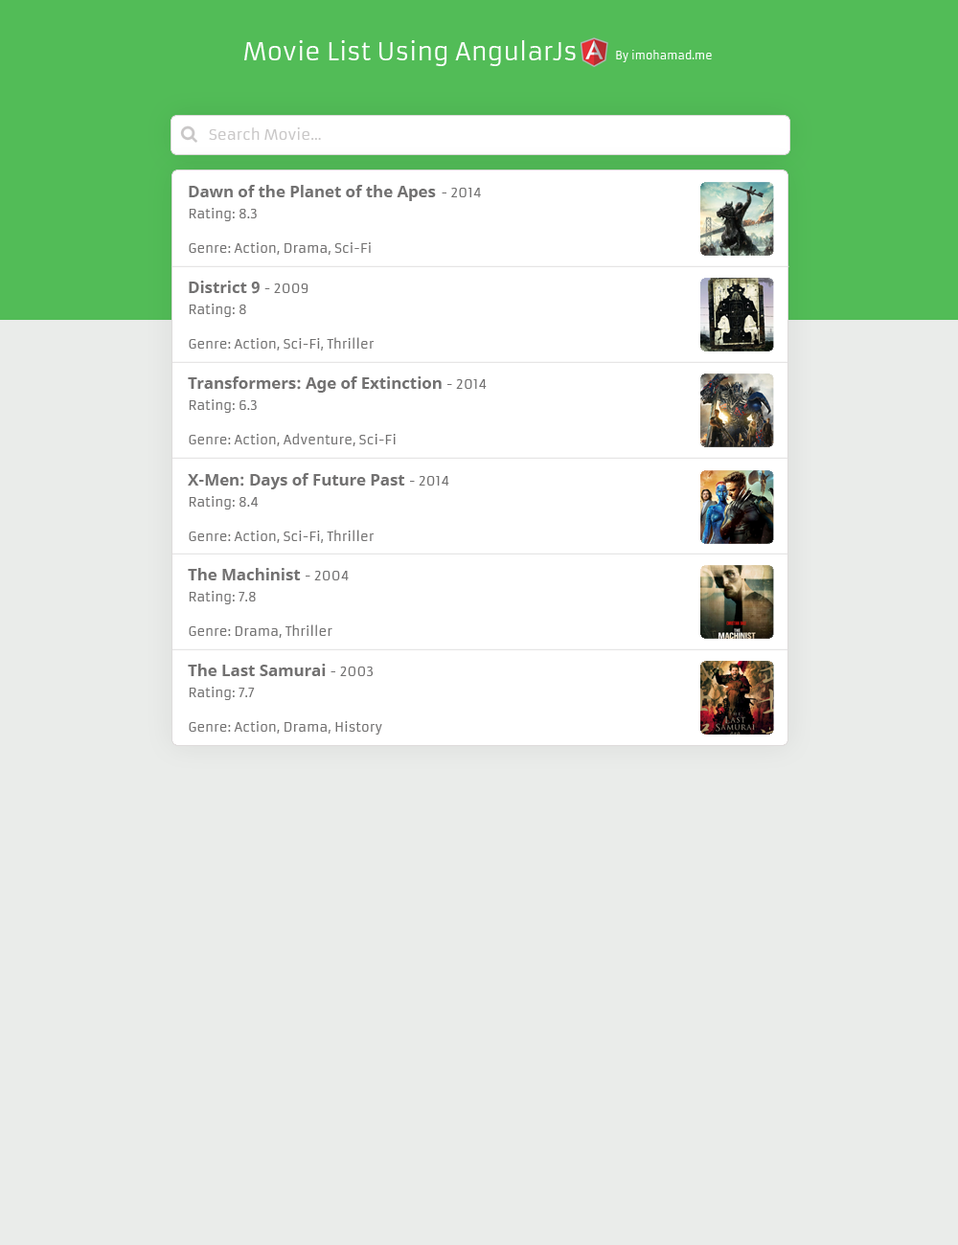
<style>
.page{position:relative;width:958px;height:1245px;background:#eaecea}
.page>*{position:absolute;margin:0}
.t1{font:24.1px "Armata-Regular";color:#ffffff}
.t2{font:10.7px "Armata-Regular";color:#feffff}
.t3{font:14.4px "Armata-Regular";color:#bcbaba}
.t4{font:16.1px "NotoSans-Bold";color:#727171}
.t5{font:12.8px "Armata-Regular";color:#727171}
</style>
<div class="page">
<p class="t1" style="left:244px;top:39px;width:332px;height:27px">Movie List Using AngularJs</p>
<p class="t2" style="left:616px;top:50px;width:96px;height:12px">By imohamad.me</p>
<p class="t3" style="left:209px;top:127px;width:112px;height:13px;opacity:0.81">Search Movie...</p>
<p class="t4" style="left:189px;top:185px;width:247px;height:16px">Dawn of the Planet of the Apes</p>
<p class="t5" style="left:442px;top:188px;width:39px;height:9px">- 2014</p>
<p class="t5" style="left:189px;top:208px;width:68px;height:13px">Rating: 8.3</p>
<p class="t5" style="left:189px;top:242px;width:182px;height:13px">Genre: Action, Drama, Sci-Fi</p>
<p class="t4" style="left:189px;top:281px;width:119px;height:13px">District 9 <span class="t5">- 2009</span></p>
<p class="t5" style="left:189px;top:304px;width:57px;height:13px">Rating: 8</p>
<p class="t5" style="left:189px;top:337px;width:185px;height:14px">Genre: Action, Sci-Fi, Thriller</p>
<p class="t4" style="left:188px;top:376px;width:299px;height:17px">Transformers: Age of Extinction <span class="t5">- 2014</span></p>
<p class="t5" style="left:189px;top:399px;width:68px;height:14px">Rating: 6.3</p>
<p class="t5" style="left:189px;top:433px;width:207px;height:13px">Genre: Action, Adventure, Sci-Fi</p>
<p class="t4" style="left:188px;top:473px;width:261px;height:16px">X-Men: Days of Future Past <span class="t5">- 2014</span></p>
<p class="t5" style="left:189px;top:496px;width:69px;height:14px">Rating: 8.4</p>
<p class="t5" style="left:189px;top:530px;width:185px;height:13px">Genre: Action, Sci-Fi, Thriller</p>
<p class="t4" style="left:188px;top:568px;width:161px;height:12px">The Machinist <span class="t5">- 2004</span></p>
<p class="t5" style="left:189px;top:591px;width:67px;height:13px">Rating: 7.8</p>
<p class="t5" style="left:189px;top:624px;width:143px;height:14px">Genre: Drama, Thriller</p>
<p class="t4" style="left:188px;top:664px;width:185px;height:12px">The Last Samurai <span class="t5">- 2003</span></p>
<p class="t5" style="left:189px;top:687px;width:66px;height:13px">Rating: 7.7</p>
<p class="t5" style="left:189px;top:721px;width:193px;height:14px">Genre: Action, Drama, History</p>
</div>
